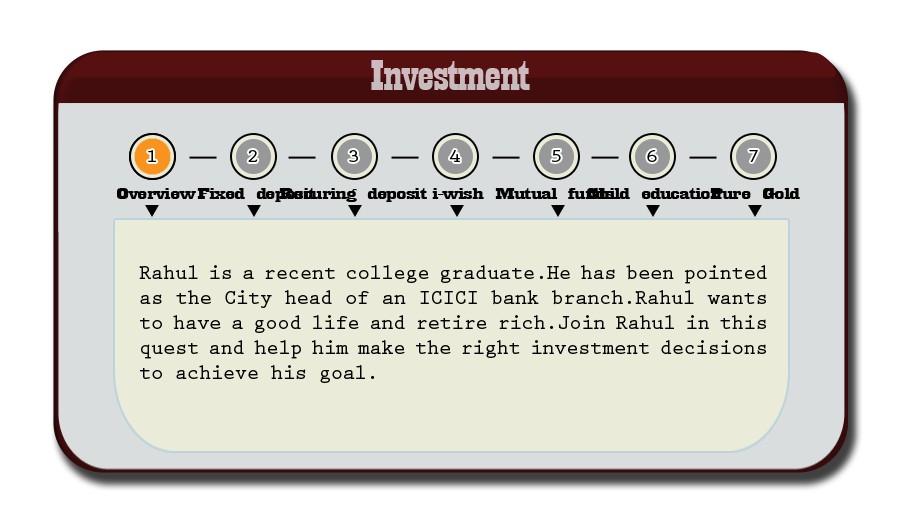
<style>
.page{position:relative;width:910px;height:512px;background:#eaebd8}
.page>*{position:absolute;margin:0}
.t1{font:44.6px "Playbill";letter-spacing:-0.025em;color:#c8bbbe;scale:1.61 1}
.t2{font:18.8px "PrestigeEliteStd-Bd";letter-spacing:-0.025em;color:#020201;scale:1.18 1}
.t3{font:17.3px "Playbill";letter-spacing:-0.025em;color:#020201;scale:2.47 1}
.t4{font:20.8px "PrestigeEliteStd-Bd";letter-spacing:-0.025em;color:#020201}
</style>
<div class="page">
<p class="t1" style="left:371px;top:60px;width:159px;height:30px">Investment</p>
<p class="t2" style="left:148px;top:150px;width:8px;height:12px">1</p>
<p class="t2" style="left:248px;top:150px;width:10px;height:12px">2</p>
<p class="t2" style="left:349px;top:150px;width:9px;height:12px">3</p>
<p class="t2" style="left:449px;top:149px;width:11px;height:13px">4</p>
<p class="t2" style="left:551px;top:150px;width:10px;height:12px">5</p>
<p class="t2" style="left:647px;top:150px;width:10px;height:12px">6</p>
<p class="t2" style="left:749px;top:150px;width:9px;height:12px">7</p>
<p class="t3" style="left:117px;top:188px;width:79px;height:11px">Overview</p>
<p class="t3" style="left:197px;top:188px;width:118px;height:14px">Fixed deposit</p>
<p class="t3" style="left:279px;top:188px;width:148px;height:14px">Recuring deposit</p>
<p class="t3" style="left:432px;top:188px;width:52px;height:11px">i-wish</p>
<p class="t3" style="left:495px;top:188px;width:120px;height:11px">Mutual funds</p>
<p class="t3" style="left:587px;top:188px;width:135px;height:11px">Child education</p>
<p class="t3" style="left:710px;top:188px;width:90px;height:11px">Pure Gold</p>
<p class="t4" style="left:139px;top:265px;width:628px;height:118px;text-align:justify">Rahul is a recent college graduate.He has been pointed as the City head of an ICICI bank branch.Rahul wants to have a good life and retire rich.Join Rahul in this quest and help him make the right investment decisions to achieve his goal.</p>
</div>
